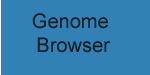
<style>
.page{position:relative;width:150px;height:75px;background:#3181b5}
.page>*{position:absolute;margin:0}
.t1{font:20px "ArialMT";color:#111c24}
</style>
<div class="page">
<p class="t1" style="left:32px;top:13px;width:78px;height:40px;text-align:center">Genome <br>Browser</p>
</div>
